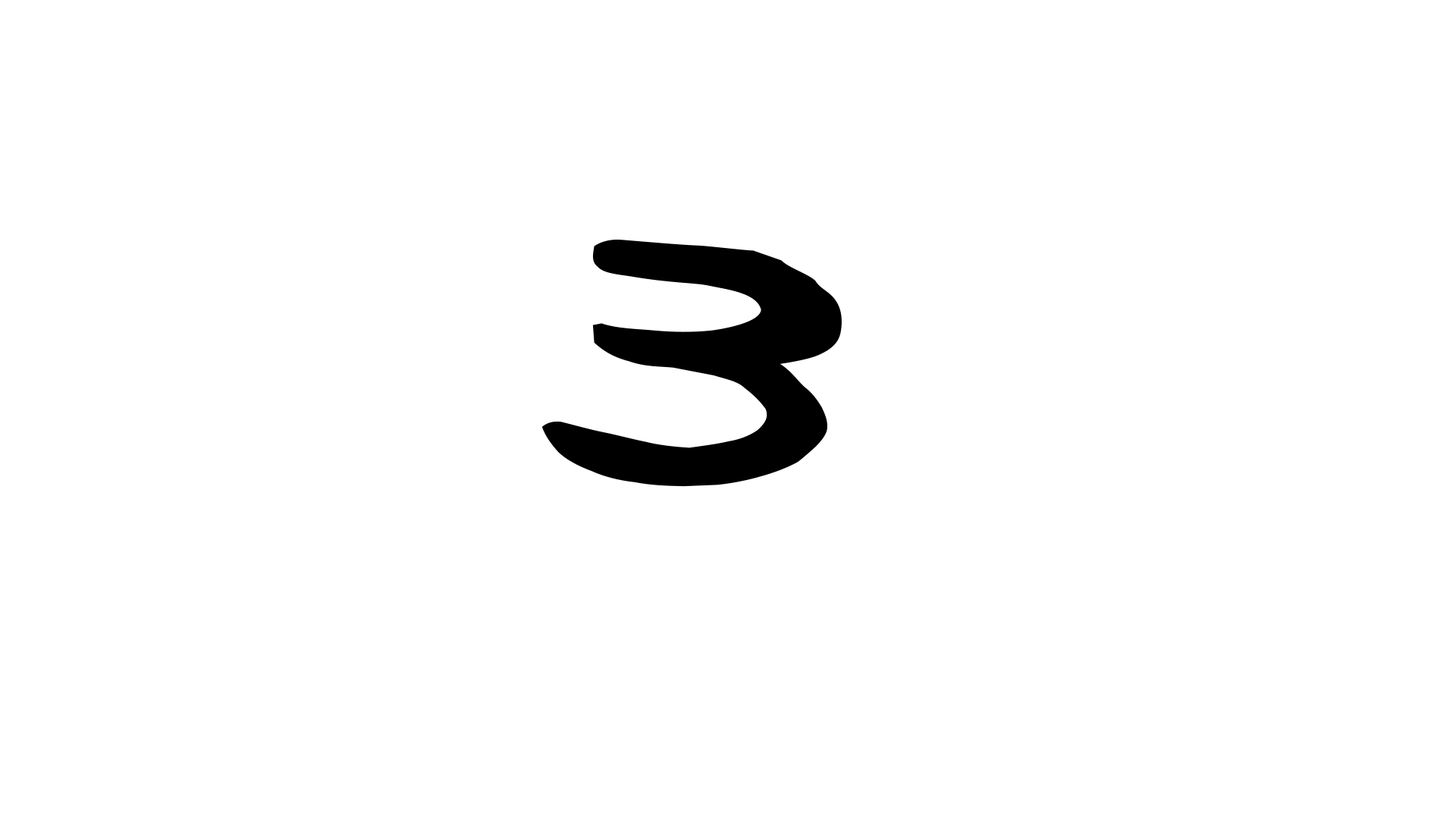
<style>
.page{position:relative;width:1456px;height:819px;background:#ffffff}
.page>*{position:absolute;margin:0}
.t1{font:337px "RiiTegakiFude";color:#000000;scale:1.93 1}
</style>
<div class="page">
<p class="t1" style="left:541px;top:240px;width:301px;height:247px">3</p>
</div>
